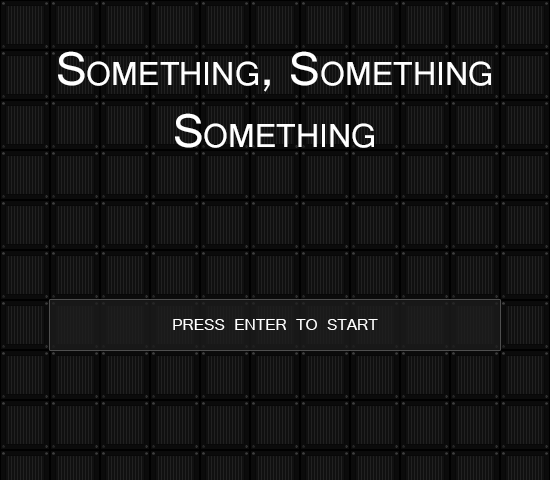
<style>
.page{position:relative;width:550px;height:480px;background:#101010}
.page>*{position:absolute;margin:0}
.t1{font:50.9px "Raavi";color:#ffffff;font-variant:small-caps}
.t2{font:24px "Shruti";color:#ffffff;font-variant:small-caps}
</style>
<div class="page">
<p class="t1" style="left:58px;top:51px;width:433px;height:97px;text-align:center">Something, Something<br>Something</p>
<p class="t2" style="left:173px;top:319px;width:205px;height:11px">press enter to start</p>
</div>
